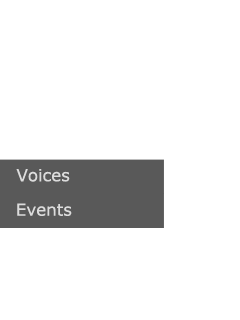
<style>
.page{position:relative;width:240px;height:320px;background:#ffffff}
.page>*{position:absolute;margin:0}
.t1{font:16.7px "Verdana";color:#dcdcdc}
</style>
<div class="page">
<p class="t1" style="left:16px;top:169px;width:54px;height:13px">Voices</p>
<p class="t1" style="left:17px;top:203px;width:55px;height:13px">Events</p>
</div>
